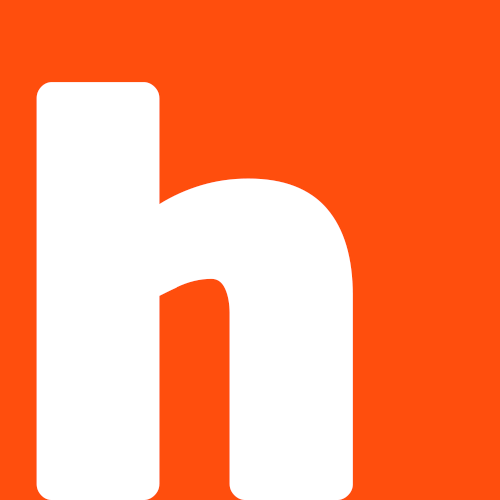
<style>
.page{position:relative;width:500px;height:500px;background:#ff4e0d}
.page>*{position:absolute;margin:0}
.t1{font:533.3px "BorisBlackBloxx";color:#ffffff}
</style>
<div class="page">
<p class="t1" style="left:36px;top:82px;width:317px;height:418px">h</p>
</div>
